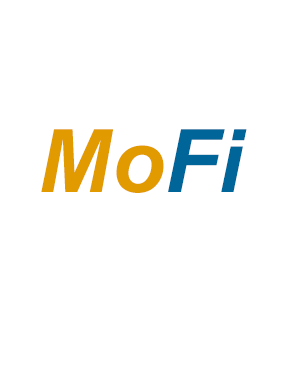
<style>
.page{position:relative;width:288px;height:384px;background:#ffffff}
.page>*{position:absolute;margin:0}
.t1{font:87.5px "Arial-BoldItalicMT";color:#e19a00}
.t2{font:87.5px "Arial-BoldItalicMT";color:#006699}
</style>
<div class="page">
<p class="t1" style="left:41px;top:129px;width:206px;height:64px">Mo<span class="t2">Fi</span></p>
</div>
